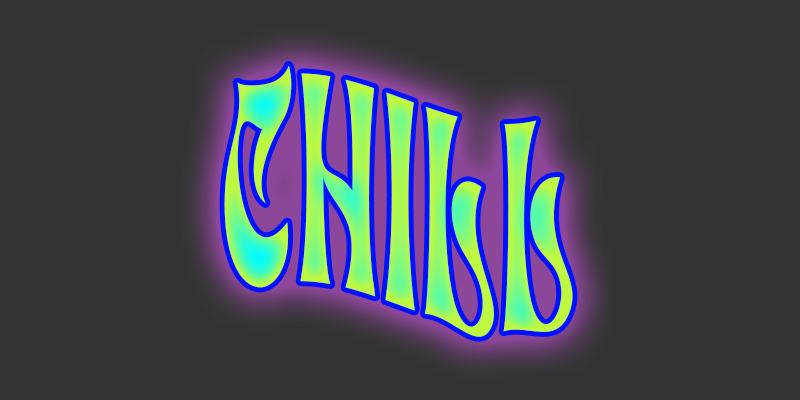
<style>
.page{position:relative;width:800px;height:400px;background:#333333}
.page>*{position:absolute;margin:0}
.t1{font:291.7px "Lostar";letter-spacing:0.05em;scale:0.45 1}
</style>
<div class="page">
<p class="t1" style="left:224px;top:65px;width:349px;height:272px">CHILL</p>
</div>
